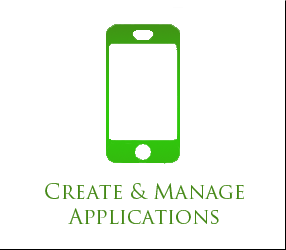
<style>
.page{position:relative;width:286px;height:250px;background:#ffffff}
.page>*{position:absolute;margin:0}
.t1{font:20.8px "TrajanPro-Regular";color:#448816}
</style>
<div class="page">
<p class="t1" style="left:45px;top:183px;width:199px;height:41px;text-align:center">Create &amp; Manage<br>Applications</p>
</div>
